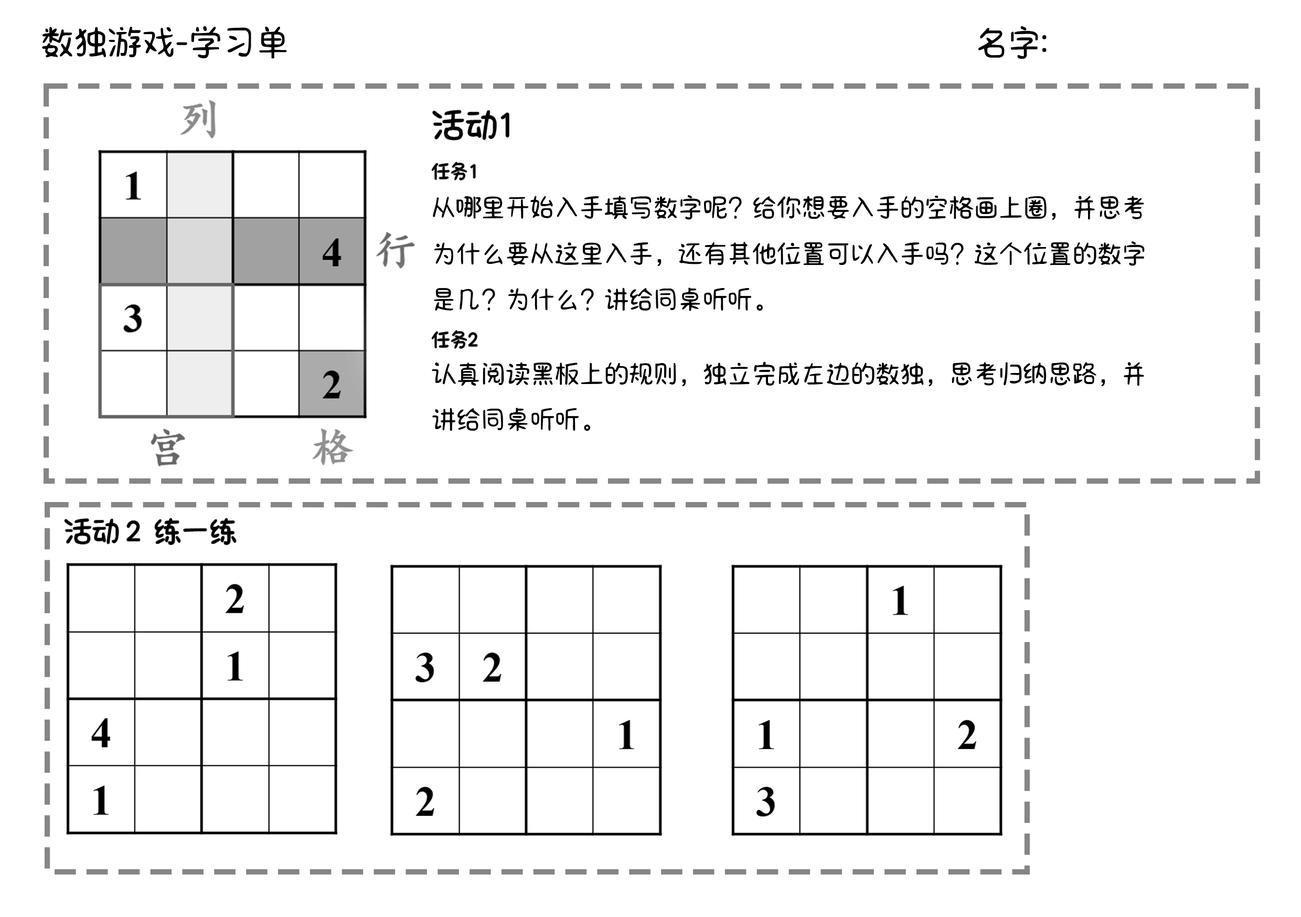
<style>
.page{position:relative;width:1301px;height:917px;background:#ffffff}
.page>*{position:absolute;margin:0}
.t1{font:39.4px "AaTCKAZDD";letter-spacing:-0.06em;color:#000000;text-transform:uppercase}
.t2{font:35px "AaTCKAZDD";letter-spacing:-0.06em;color:#000000;text-transform:uppercase}
.t3{font:19.7px "AaTCKAZDD";letter-spacing:-0.06em;color:#000000;text-transform:uppercase}
.t4{font:26.2px "AaTCKAZDD";letter-spacing:-0.06em;color:#000000;text-transform:uppercase}
.t5{font:29.6px "AaTCKAZDD";letter-spacing:-0.06em;color:#000000;text-transform:uppercase}
</style>
<div class="page">
<p class="t1" style="left:42px;top:26px;width:245px;height:33px">数独游戏-学习单</p>
<p class="t1" style="left:978px;top:26px;width:68px;height:33px">名字:</p>
<p class="t2" style="left:433px;top:110px;width:76px;height:30px">活动1</p>
<p class="t3" style="left:432px;top:162px;width:43px;height:18px">任务1</p>
<p class="t4" style="left:433px;top:195px;width:711px;height:116px">从哪里开始入手填写数字呢？给你想要入手的空格画上圈，并思考为什么要从这里入手，还有其他位置可以入手吗？这个位置的数字是几？为什么？讲给同桌听听。</p>
<p class="t3" style="left:432px;top:330px;width:45px;height:18px">任务2</p>
<p class="t4" style="left:432px;top:361px;width:712px;height:70px">认真阅读黑板上的规则，独立完成左边的数独，思考归纳思路，并讲给同桌听听。</p>
<p class="t5" style="left:65px;top:518px;width:171px;height:26px">活动 2  练一练</p>
</div>
